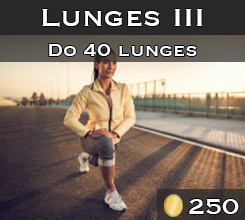
<style>
.page{position:relative;width:245px;height:220px}
.page>*{position:absolute;margin:0}
.t1{font:33.3px "Copperplate";color:#ffffff}
.t2{font:22.2px "Copperplate";color:#ffffff}
.t3{font:27.8px "Copperplate";color:#ffffff}
</style>
<div class="page">
<p class="t1" style="left:42px;top:9px;width:161px;height:18px">Lunges III</p>
<p class="t2" style="left:48px;top:44px;width:149px;height:12px">Do 40 lunges</p>
<p class="t3" style="left:189px;top:199px;width:50px;height:15px">250</p>
</div>
